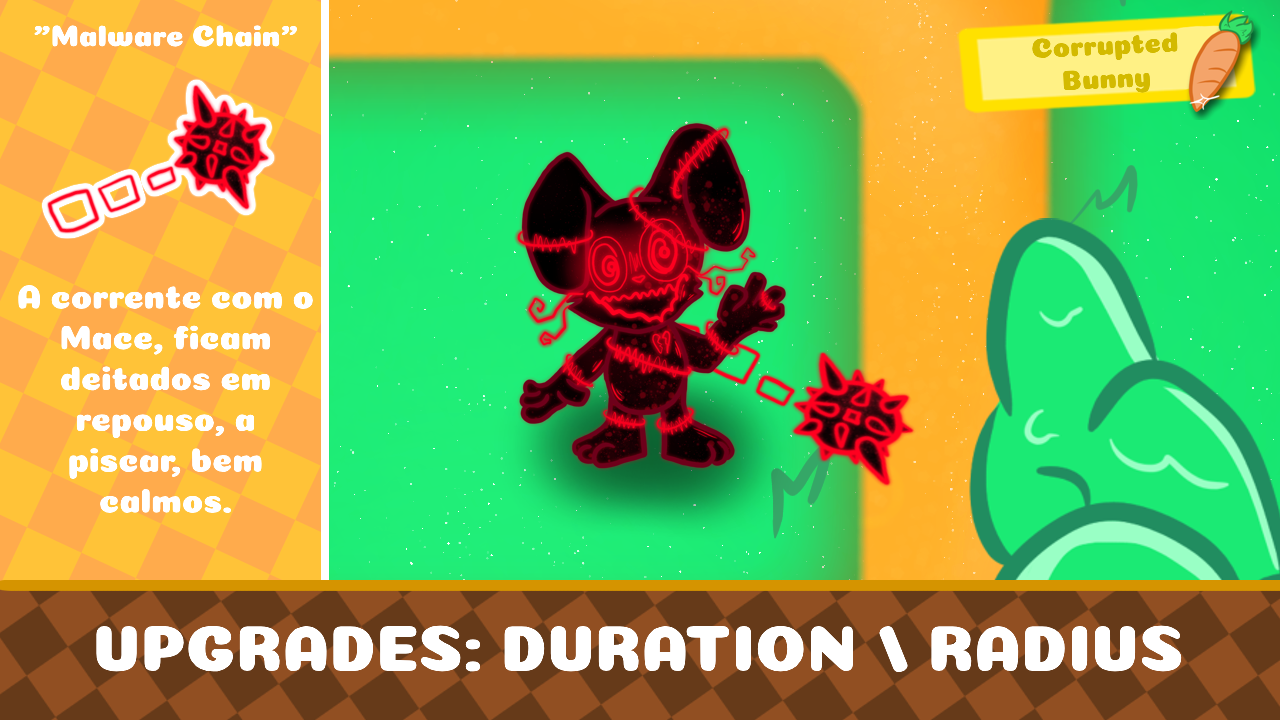
<style>
.page{position:relative;width:1280px;height:720px}
.page>*{position:absolute;margin:0}
.t1{font:30px "Coiny-Regular";color:#ffffff}
.t2{font:27.9px "Coiny-Regular";color:#d3ba00}
.t3{font:34px "Coiny-Regular";color:#ffffff}
.t4{font:65px "Coiny-Regular";color:#ffffff}
</style>
<div class="page">
<p class="t1" style="left:34px;top:25px;width:263px;height:22px">"Malware Chain"</p>
<p class="t2" style="left:1032px;top:32px;width:146px;height:61px;text-align:center;rotate:-3deg">Corrupted<br>Bunny</p>
<p class="t3" style="left:18px;top:285px;width:295px;height:228px;text-align:center">A corrente com o<br>Mace, ficam deitados em repouso, a piscar, bem calmos.</p>
<p class="t4" style="left:96px;top:625px;width:1086px;height:47px">UPGRADES: DURATION / RADIUS</p>
</div>
